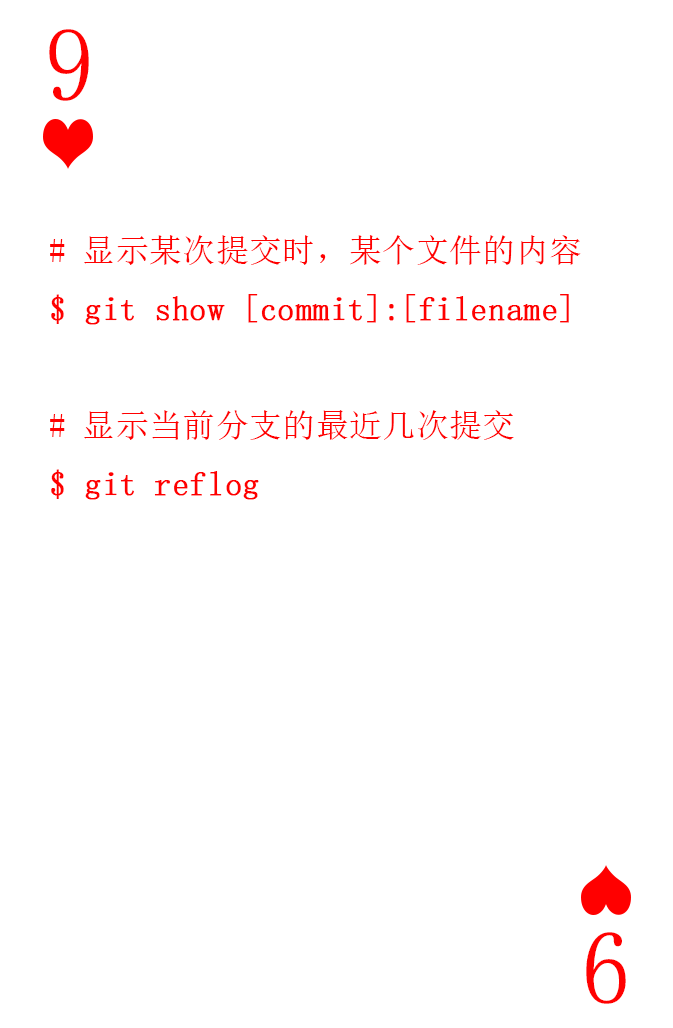
<style>
.page{position:relative;width:673px;height:1028px;background:#ffffff}
.page>*{position:absolute;margin:0}
.t1{font:104.2px "SimSun-ExtB";color:#ff0101;scale:0.93 1}
.t2{font:33.3px "SimSun";color:#ff0000;font-weight:bold}
.t3{font:33.3px "SimSun";color:#ff0000}
</style>
<div class="page">
<p class="t1" style="left:49px;top:29px;width:40px;height:72px">9</p>
<p class="t2" style="left:50px;top:235px;width:531px;height:265px"><span class="t3"># 显示某次提交时，某个文件的内容<br></span>$ git show [commit]:[filename]<br><span class="t3"><br># 显示当前分支的最近几次提交<br></span>$ git reflog</p>
<p class="t1" style="left:586px;top:932px;width:40px;height:72px;rotate:180deg">9</p>
</div>
